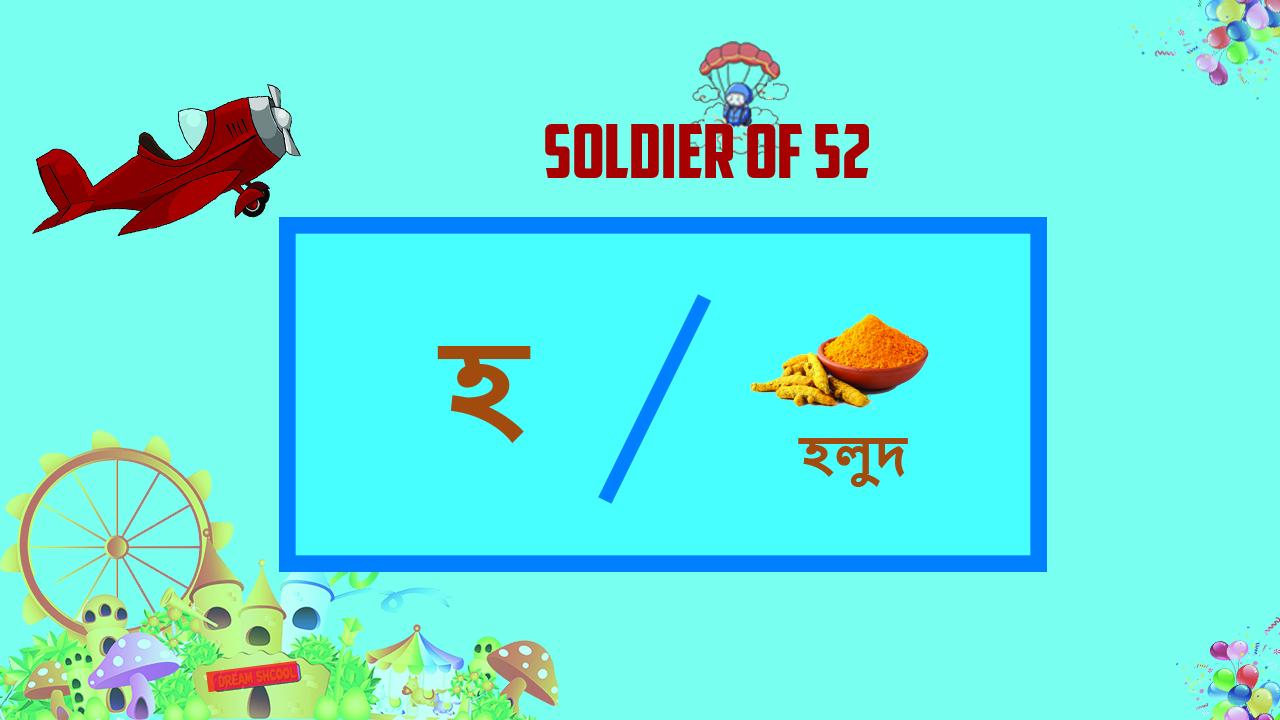
<style>
.page{position:relative;width:1280px;height:720px;background:#78ffef}
.page>*{position:absolute;margin:0}
.t1{font:74.5px "AmericanCaptain";color:#a60000}
.t2{font:122.1px "NirmalaUI-Bold";color:#a24b0d}
.t3{font:116.7px "NirmalaUI-Bold";color:#a24c0e}
.t4{font:49.7px "NirmalaUI-Bold";color:#a24b0d}
</style>
<div class="page">
<p class="t1" style="left:545px;top:124px;width:324px;height:54px">SOLDIER OF 52</p>
<p class="t2" style="left:437px;top:346px;width:94px;height:97px"><span class="t3">  </span>হ</p>
<p class="t4" style="left:798px;top:438px;width:110px;height:49px">হলুদ</p>
</div>
